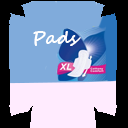
<style>
.page{position:relative;width:128px;height:128px;background:#80abdb}
.page>*{position:absolute;margin:0}
.t1{font:18px "SegoeScript-Bold";color:#ffffff}
</style>
<div class="page">
<p class="t1" style="left:33px;top:31px;width:48px;height:15px">Pads</p>
</div>
